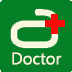
<style>
.page{position:relative;width:72px;height:72px;background:#058026}
.page>*{position:absolute;margin:0}
.t1{font:16.7px "NirmalaUI";color:#f9f6de}
</style>
<div class="page">
<p class="t1" style="left:12px;top:52px;width:50px;height:13px">Doctor</p>
</div>
